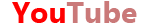
<style>
.page{position:relative;width:150px;height:25px;background:#ffffff}
.page>*{position:absolute;margin:0}
.t1{font:30px "Ebrima-Bold";color:#ca7979}
.t2{font:30px "Ebrima-Bold";color:#ff0000}
</style>
<div class="page">
<p class="t1" style="left:12px;top:1px;width:125px;height:22px"><span class="t2">You</span>Tube</p>
</div>
